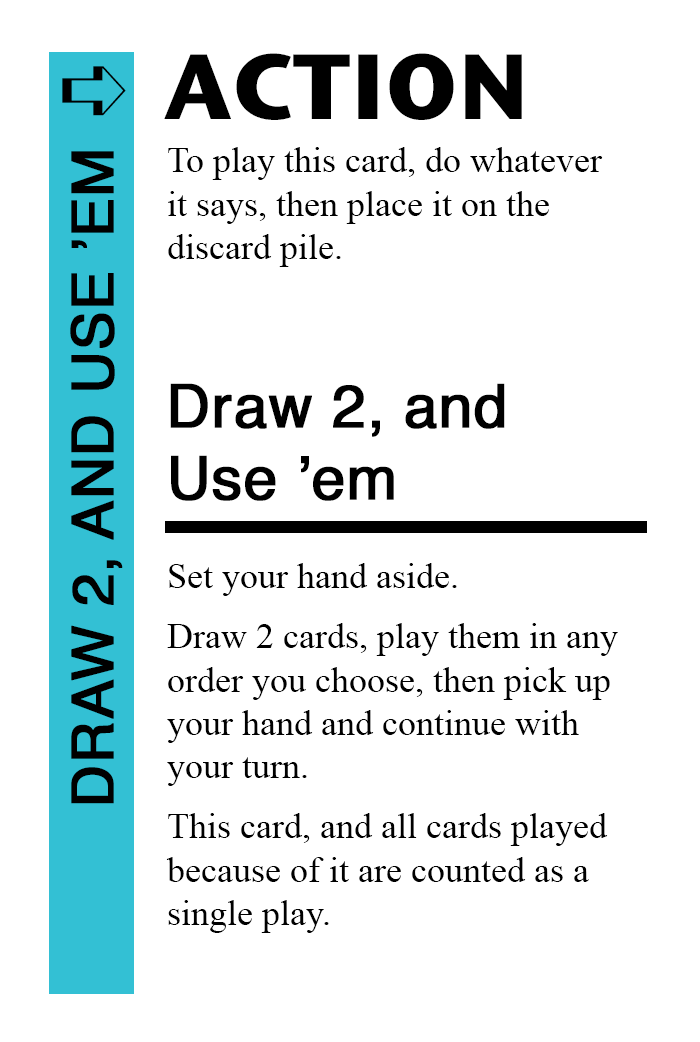
<style>
.page{position:relative;width:700px;height:1042px;background:#ffffff}
.page>*{position:absolute;margin:0}
.t1{font:92px "StoneSansITC-Bold";color:#000000}
.t2{font:82px "MS-Gothic";color:#000000}
.t3{font:36px "TimesNewRomanPSMT";color:#000000}
.t4{font:58px "Helvetica";color:#000000;font-weight:bold}
.t5{font:60px "Helvetica";color:#000000;font-weight:bold}
</style>
<div class="page">
<p class="t1" style="left:164px;top:53px;width:358px;height:67px">ACTION</p>
<p class="t2" style="left:62px;top:66px;width:64px;height:50px">➪</p>
<p class="t3" style="left:168px;top:147px;width:435px;height:120px">To play this card, do whatever<br>it says, then place it on the<br>discard pile.</p>
<p class="t4" style="left:70px;top:151px;width:53px;height:653px;rotate:-90deg">DRAW 2, AND USE ’EM</p>
<p class="t5" style="left:170px;top:383px;width:335px;height:118px">Draw 2, and<br>Use ’em</p>
<p class="t3" style="left:169px;top:563px;width:288px;height:33px">Set your hand aside.</p>
<p class="t3" style="left:167px;top:623px;width:451px;height:163px">Draw 2 cards, play them in any<br>order you choose, then pick up<br>your hand and continue with<br>your turn.</p>
<p class="t3" style="left:166px;top:813px;width:442px;height:120px">This card, and all cards played<br>because of it are counted as a <br>single play.</p>
</div>
